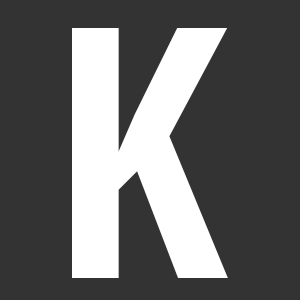
<style>
.page{position:relative;width:300px;height:300px;background:#333333}
.page>*{position:absolute;margin:0}
.t1{font:350px "OpenSans-CondensedBold";color:#ffffff}
</style>
<div class="page">
<p class="t1" style="left:72px;top:28px;width:156px;height:250px">K</p>
</div>
